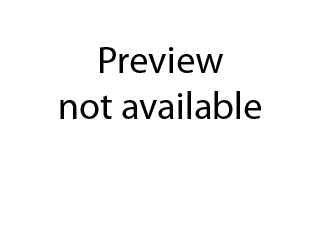
<style>
.page{position:relative;width:320px;height:240px;background:#ffffff}
.page>*{position:absolute;margin:0}
.t1{font:38.4px "MyriadPro-Regular";color:#000000}
</style>
<div class="page">
<p class="t1" style="left:60px;top:47px;width:201px;height:72px;text-align:center">Preview <br>not available</p>
</div>
